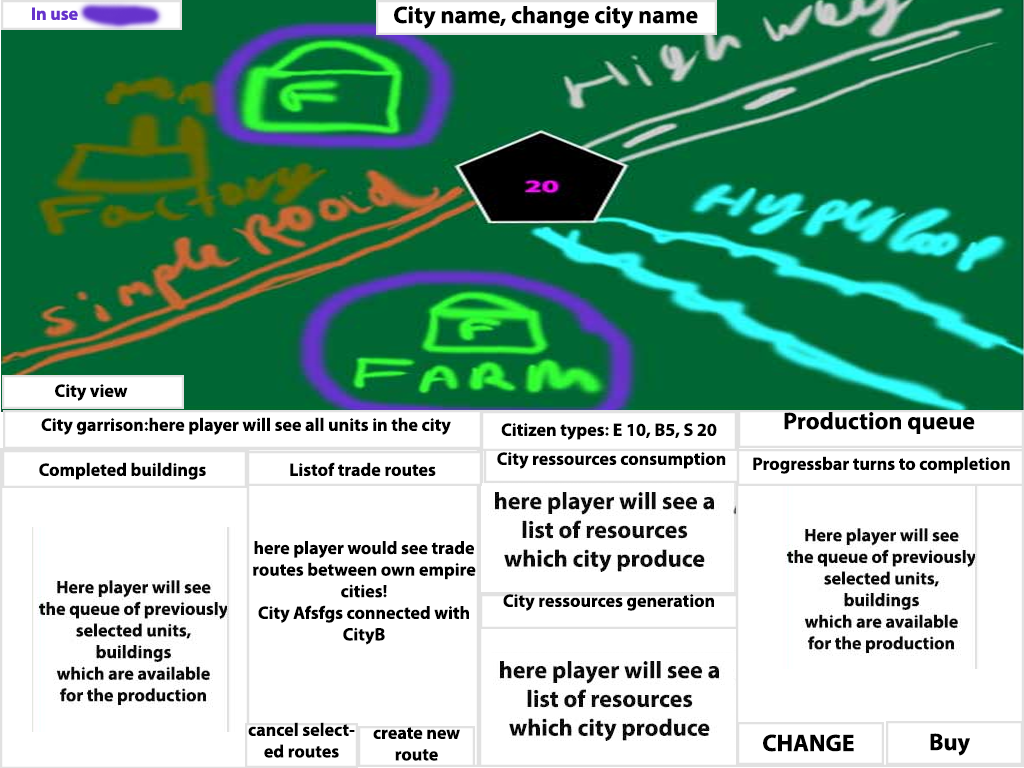
<style>
.page{position:relative;width:1024px;height:768px;background:#ffffff}
.page>*{position:absolute;margin:0}
.t1{font:24px "MyriadPro-Bold";color:#000000}
.t2{font:18px "MyriadPro-Bold";color:#000000}
</style>
<div class="page">
<p class="t1" style="left:394px;top:6px;width:304px;height:23px">City name, change city name</p>
<p class="t2" style="left:55px;top:384px;width:73px;height:17px">City view</p>
<p class="t1" style="left:784px;top:412px;width:191px;height:22px">Production queue</p>
<p class="t2" style="left:41px;top:417px;width:410px;height:18px">City garrison:here player will see all units in the city</p>
<p class="t2" style="left:501px;top:423px;width:216px;height:17px">Citizen types: E 10, B5, S 20</p>
<p class="t2" style="left:39px;top:462px;width:167px;height:18px">Completed buildings</p>
<p class="t2" style="left:290px;top:462px;width:146px;height:14px">Listof trade routes</p>
<p class="t2" style="left:497px;top:452px;width:229px;height:17px">City ressources consumption</p>
<p class="t2" style="left:753px;top:456px;width:257px;height:18px">Progressbar turns to completion</p>
<p class="t2" style="left:253px;top:541px;width:223px;height:104px;text-align:center">here player would see trade routes between own empire<br>cities!<br>City Afsfgs connected with CityB</p>
<p class="t2" style="left:503px;top:594px;width:211px;height:17px">City ressources generation</p>
<p class="t2" style="left:248px;top:722px;width:107px;height:36px;text-align:center">cancel selected routes</p>
<p class="t2" style="left:373px;top:727px;width:87px;height:34px;text-align:center">create new route</p>
<p class="t1" style="left:763px;top:734px;width:91px;height:18px">CHANGE</p>
<p class="t1" style="left:930px;top:733px;width:40px;height:23px">Buy</p>
</div>
